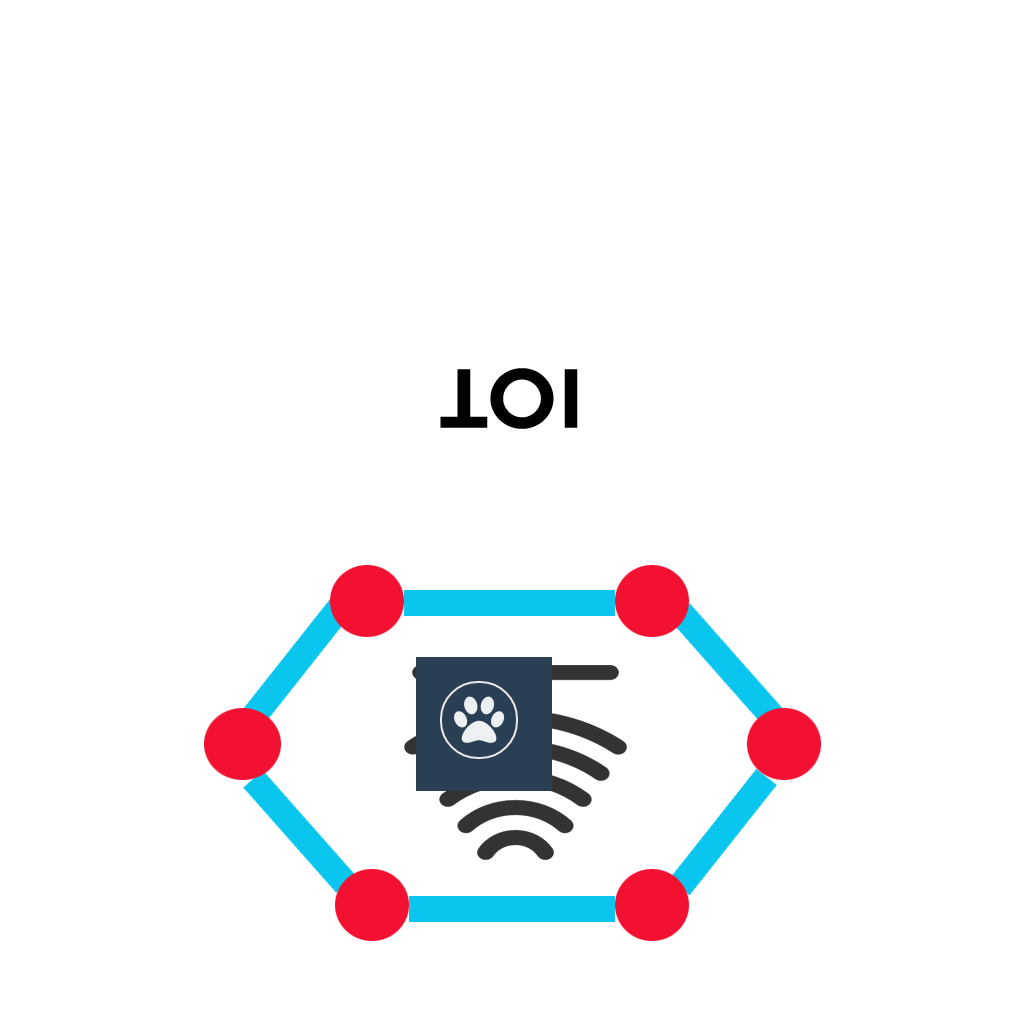
<style>
.page{position:relative;width:1024px;height:1024px;background:#ffffff}
.page>*{position:absolute;margin:0}
.t1{font:80px "Renogare-Regular";color:#000000}
</style>
<div class="page">
<p class="t1" style="left:440px;top:368px;width:138px;height:61px;rotate:180deg">IOT</p>
</div>
